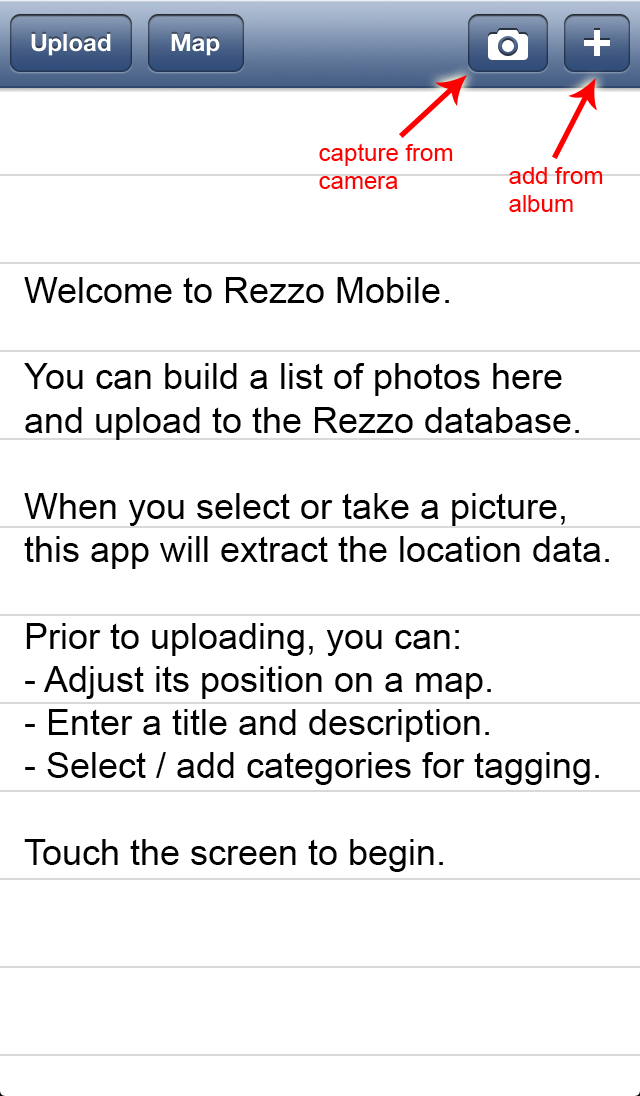
<style>
.page{position:relative;width:640px;height:1096px;background:#ffffff}
.page>*{position:absolute;margin:0}
.t1{font:24px "ArialMT";color:#ff0000}
.t2{font:36px "ArialMT";color:#000000}
</style>
<div class="page">
<p class="t1" style="left:319px;top:143px;width:134px;height:46px">capture from<br>camera</p>
<p class="t1" style="left:509px;top:167px;width:94px;height:45px">add from<br>album</p>
<p class="t2" style="left:24px;top:277px;width:585px;height:595px">Welcome to Rezzo Mobile.<br><br>You can build a list of photos here<br>and upload to the Rezzo database.<br><br>When you select or take a picture,<br>this app will extract the location data.<br><br>Prior to uploading, you can:<br>- Adjust its position on a map.<br>- Enter a title and description.<br>- Select / add categories for tagging.<br><br>Touch the screen to begin.</p>
</div>
